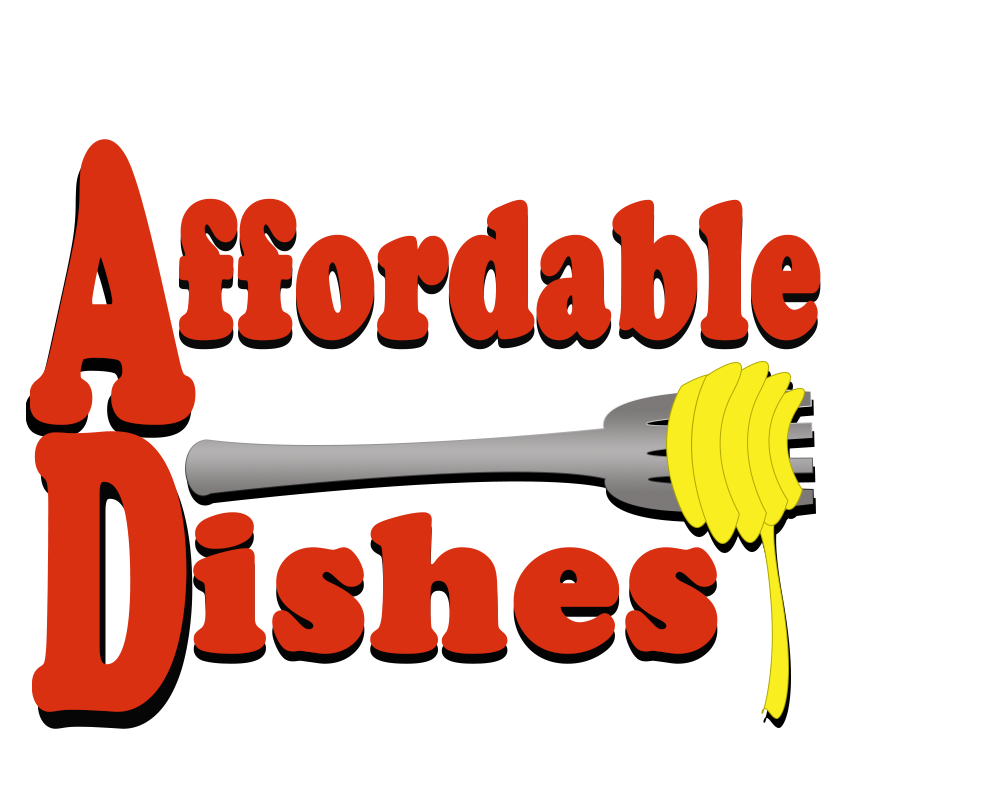
<style>
.page{position:relative;width:1000px;height:800px;background:#ffffff}
.page>*{position:absolute;margin:0}
.t1{font:400px "CooperBlack";color:#d93011;font-weight:bold;scale:0.48 1}
.t2{font:200px "CooperBlack";color:#d93011;font-weight:bold;scale:0.65 1}
.t3{font:200px "CooperBlack";color:#d93011;font-weight:bold}
</style>
<div class="page">
<p class="t1" style="left:30px;top:139px;width:166px;height:286px">A</p>
<p class="t1" style="left:26px;top:152px;width:166px;height:286px">A</p>
<p class="t2" style="left:179px;top:198px;width:642px;height:143px">ffordable</p>
<p class="t2" style="left:179px;top:207px;width:642px;height:143px">ffordable</p>
<p class="t1" style="left:32px;top:431px;width:155px;height:281px">D</p>
<p class="t1" style="left:38px;top:448px;width:155px;height:281px">D</p>
<p class="t3" style="left:193px;top:512px;width:525px;height:142px">ishes</p>
<p class="t3" style="left:193px;top:522px;width:525px;height:142px">ishes</p>
</div>
